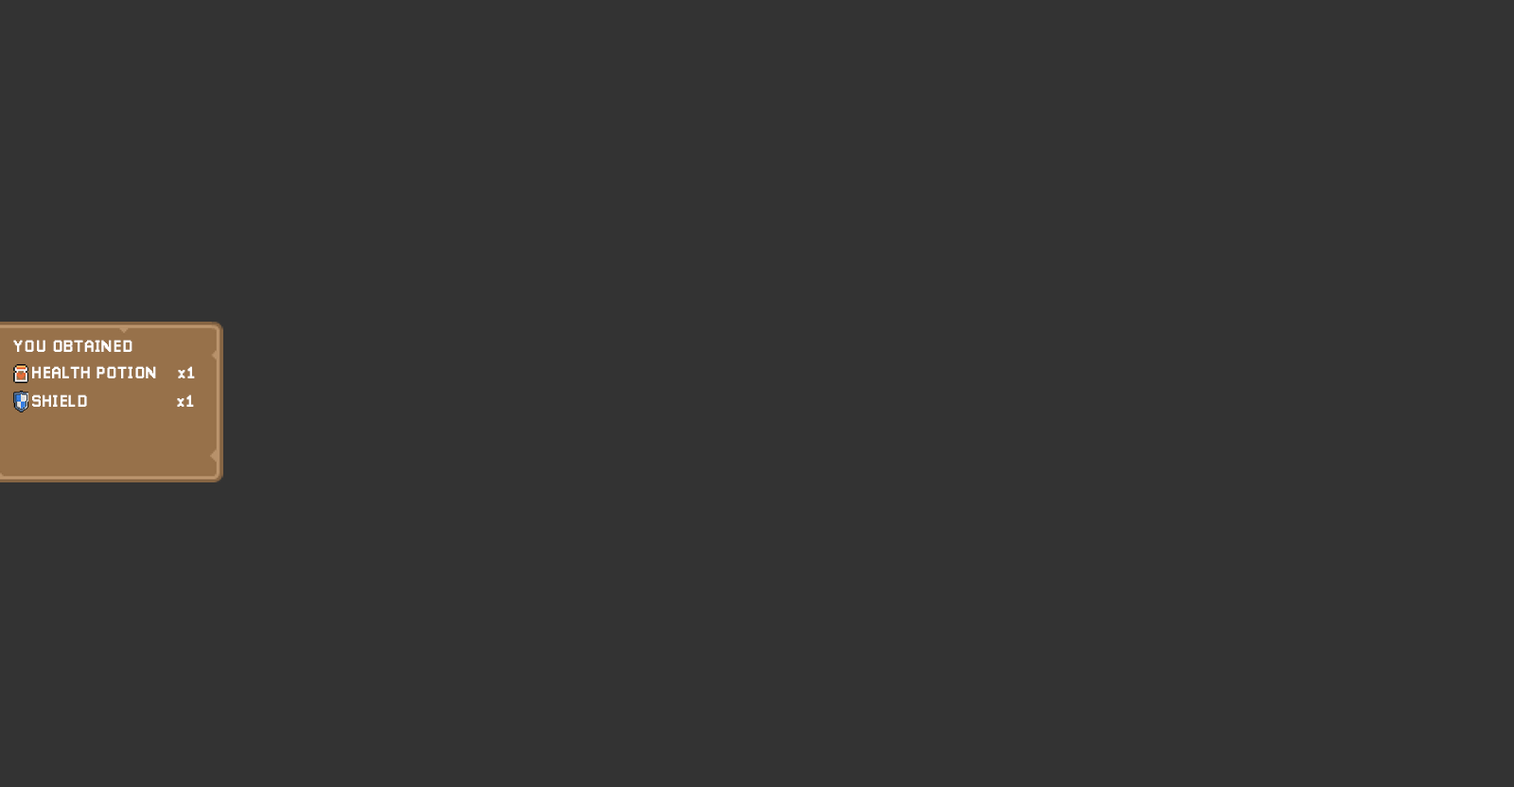
<style>
.page{position:relative;width:1514px;height:787px;background:#333333}
.page>*{position:absolute;margin:0}
.t1{font:16.7px "Pixellari";color:#ffffff}
</style>
<div class="page">
<p class="t1" style="left:13px;top:340px;width:120px;height:12px">YOU OBTAINED</p>
<p class="t1" style="left:32px;top:366px;width:163px;height:13px">HEALTH POTION    x1</p>
<p class="t1" style="left:32px;top:395px;width:162px;height:12px">SHIELD                 x1</p>
</div>
